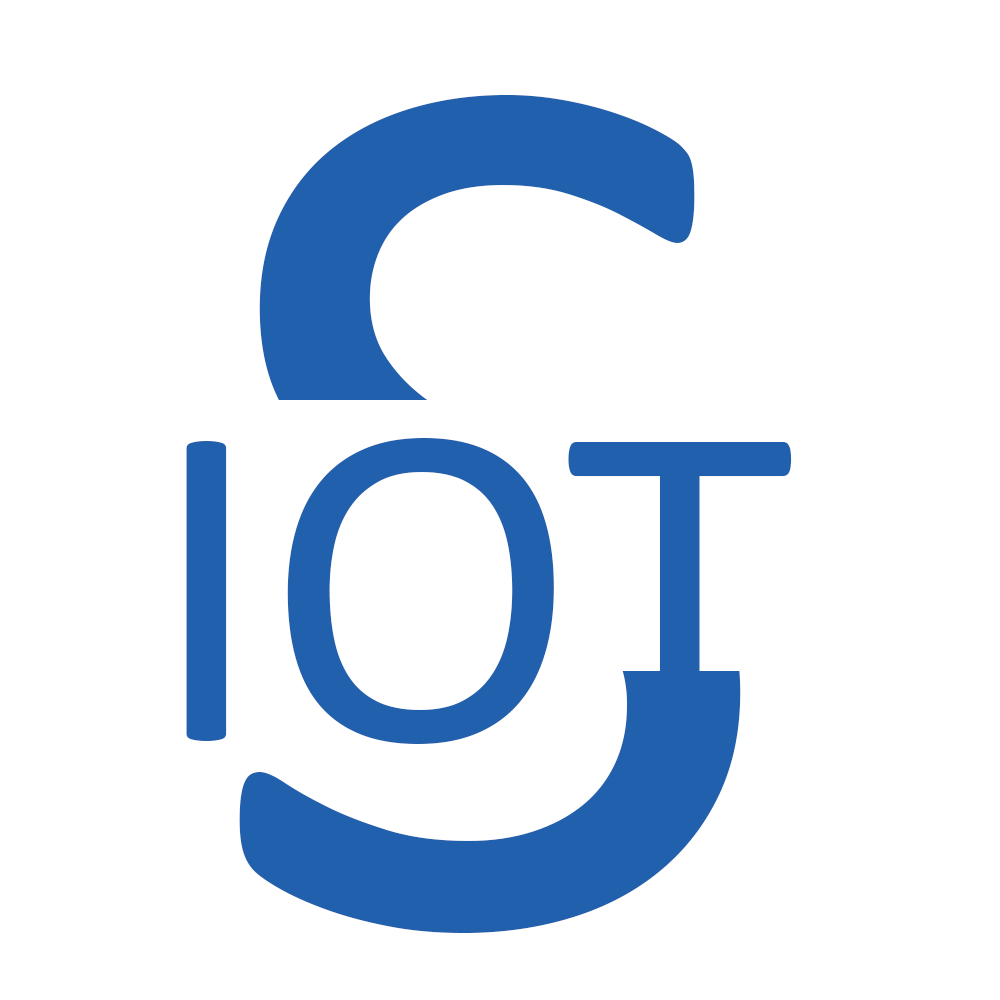
<style>
.page{position:relative;width:1000px;height:1000px;background:#ffffff}
.page>*{position:absolute;margin:0}
.t1{font:1287.5px "Calibri";color:#2160ad}
.t2{font:470.8px "Calibri";color:#2160ad}
</style>
<div class="page">
<p class="t1" style="left:239px;top:95px;width:502px;height:838px">S</p>
<p class="t2" style="left:186px;top:438px;width:606px;height:306px">IOT</p>
</div>
